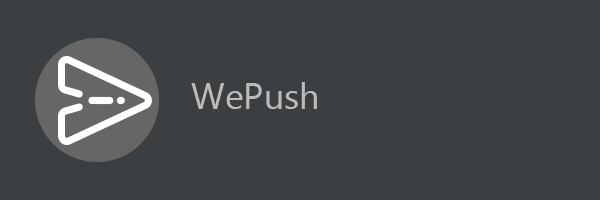
<style>
.page{position:relative;width:600px;height:200px;background:#3c3f41}
.page>*{position:absolute;margin:0}
.t1{font:36px "SegoeUI";color:#bbbbbb}
</style>
<div class="page">
<p class="t1" style="left:191px;top:82px;width:126px;height:27px">WePush</p>
</div>
